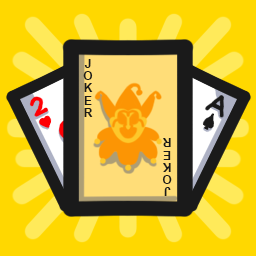
<style>
.page{position:relative;width:256px;height:256px;background:#ffd800}
.page>*{position:absolute;margin:0}
.t1{font:12.3px/12.3px "Arial-BoldMT";letter-spacing:0.005em;color:#1a1a1a}
</style>
<div class="page">
<p class="t1" style="left:83px;top:59px;width:10px;height:58px;text-align:center">J<br>O<br>K<br>E<br>R</p>
<p class="t1" style="left:162px;top:138px;width:10px;height:58px;text-align:center;rotate:180deg">J<br>O<br>K<br>E<br>R</p>
</div>
